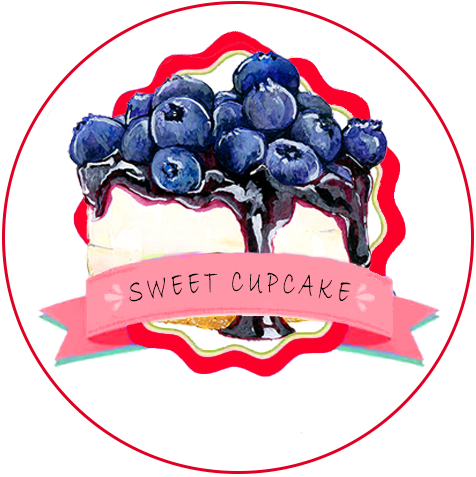
<style>
.page{position:relative;width:476px;height:477px;background:#ffffff}
.page>*{position:absolute;margin:0}
.t1{font:35.1px "BradleyHandITC";letter-spacing:0.24em;color:#000000;font-variant:small-caps;scale:0.52 1}
</style>
<div class="page">
<p class="t1" style="left:129px;top:271px;width:222px;height:31px">SWEET CUPCAKE</p>
</div>
